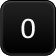
<style>
.page{position:relative;width:56px;height:56px}
.page>*{position:absolute;margin:0}
.t1{font:30px "Calibri";color:#f7f7f7}
</style>
<div class="page">
<p class="t1" style="left:21px;top:18px;width:14px;height:21px">0</p>
</div>
